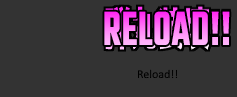
<style>
.page{position:relative;width:237px;height:97px;background:#333333}
.page>*{position:absolute;margin:0}
.t1{font:51.9px "Teko-Semibold";font-weight:bold;scale:0.73 1}
</style>
<div class="page">
<p class="t1" style="left:104px;top:11px;width:126px;height:34px">RELOAD!!</p>
</div>
